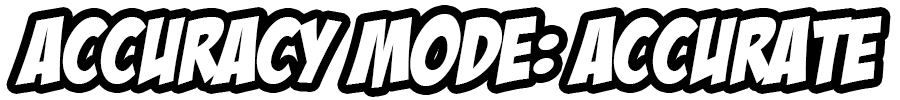
<style>
.page{position:relative;width:900px;height:100px;background:#ffffff}
.page>*{position:absolute;margin:0}
.t1{font:91.7px "BadaBoomBB";letter-spacing:0.02em;color:#ffffff}
</style>
<div class="page">
<p class="t1" style="left:15px;top:14px;width:867px;height:74px">Accuracy Mode: Accurate</p>
</div>
